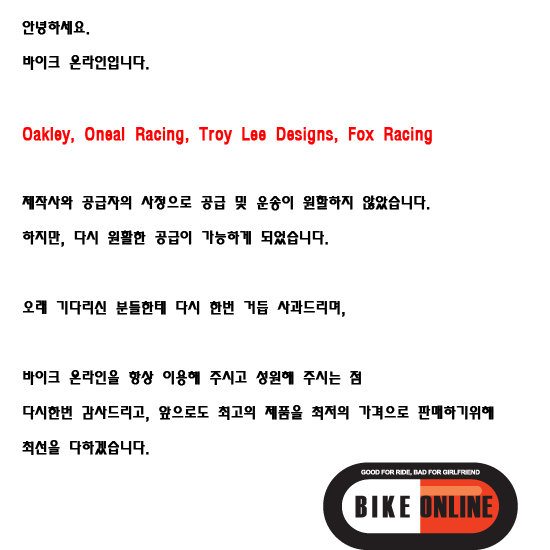
<style>
.page{position:relative;width:550px;height:550px;background:#ffffff}
.page>*{position:absolute;margin:0}
.t1{font:15px/35px "MoeumTR-HM";color:#000000;font-weight:bold}
.t2{font:16px/35px "MoeumTR-HM";color:#ff0000;font-weight:bold}
</style>
<div class="page">
<p class="t1" style="left:22px;top:21px;width:472px;height:434px">안녕하세요.<br>바이크 온라인입니다.<br><br><span class="t2">Oakley, Oneal Racing, Troy Lee Designs, Fox Racing<br><br></span>제작사와 공급자의 사정으로 공급 및 운송이 원할하지 않았습니다.<br>하지만, 다시 원활한 공급이 가능하게 되었습니다.<br><br>오래 기다리신 분들한테 다시 한번 거듭 사과드리며,<br><br>바이크 온라인을 항상 이용해 주시고 성원해 주시는 점 <br>다시한번 감사드리고, 앞으로도 최고의 제품을 최저의 가격으로 판매하기위해<br>최선을 다하겠습니다.</p>
</div>
